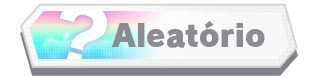
<style>
.page{position:relative;width:316px;height:78px;background:#ffffff}
.page>*{position:absolute;margin:0}
.t1{font:30.7px "RodinPro-UB";color:#8b8c92}
</style>
<div class="page">
<p class="t1" style="left:112px;top:21px;width:153px;height:27px">Aleatório</p>
</div>
